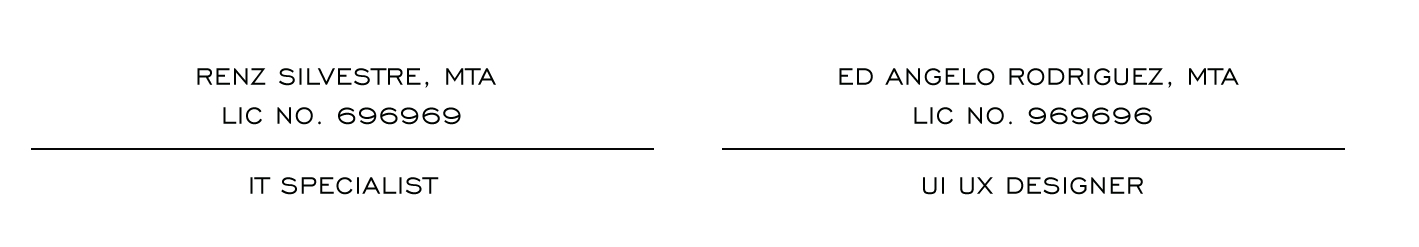
<style>
.page{position:relative;width:1419px;height:247px;background:#ffffff}
.page>*{position:absolute;margin:0}
.t1{font:30.5px "EngraversGothicBT-Regular";letter-spacing:0.025em;color:#000401;text-transform:uppercase}
</style>
<div class="page">
<p class="t1" style="left:197px;top:68px;width:299px;height:20px">Renz silvestre, MTA</p>
<p class="t1" style="left:839px;top:68px;width:400px;height:20px">Ed angelo rodriguez, mta</p>
<p class="t1" style="left:223px;top:107px;width:238px;height:18px">Lic no. 696969</p>
<p class="t1" style="left:914px;top:107px;width:238px;height:18px">Lic no. 969696</p>
<p class="t1" style="left:250px;top:177px;width:189px;height:18px">It specialist</p>
<p class="t1" style="left:923px;top:177px;width:220px;height:18px">ui ux designer</p>
</div>
